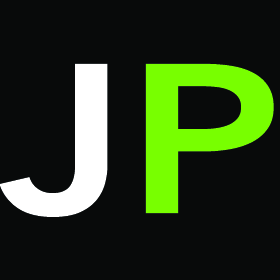
<style>
.page{position:relative;width:280px;height:280px;background:#080a0a}
.page>*{position:absolute;margin:0}
.t1{font:210.7px "AvenirNext-DemiBold";color:#ffffff;scale:1.22 1}
.t2{font:210.7px "AvenirNext-DemiBold";color:#78ff00;scale:1.22 1}
</style>
<div class="page">
<p class="t1" style="left:0px;top:63px;width:274px;height:154px">J<span class="t2">P</span></p>
</div>
